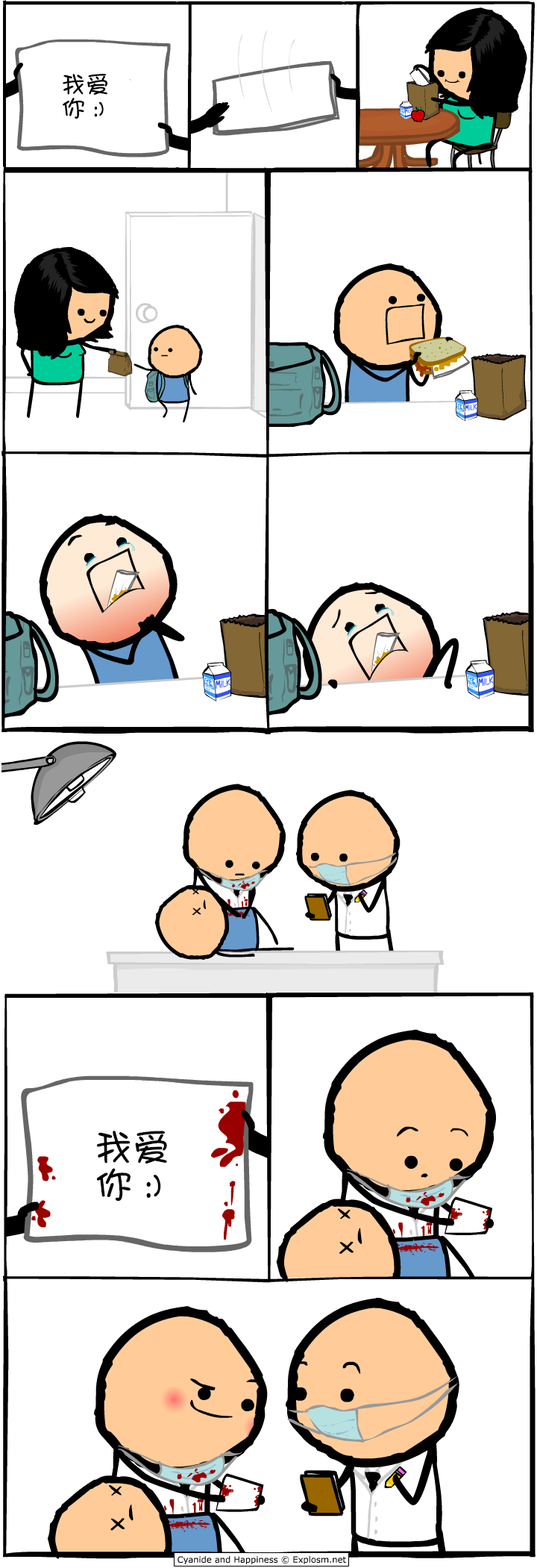
<style>
.page{position:relative;width:537px;height:1568px;background:#ffffff}
.page>*{position:absolute;margin:0}
.t1{font:23.9px/23.9px "DFGirl";color:#000000}
.t2{font:37.3px/37.3px "DFGirl";color:#000000}
</style>
<div class="page">
<p class="t1" style="left:63px;top:73px;width:44px;height:46px">我爱<br>你 :)</p>
<p class="t2" style="left:96px;top:1131px;width:71px;height:70px">我爱<br>你 :)</p>
</div>
